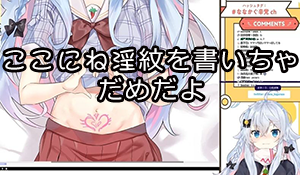
<style>
.page{position:relative;width:300px;height:175px}
.page>*{position:absolute;margin:0}
.t1{font:25px/30px "Meiryo";letter-spacing:0.09em;color:#ffffff}
.t2{font:25px/30px "DFPShaoNvW5";letter-spacing:0.09em;color:#ffffff}
</style>
<div class="page">
<p class="t1" style="left:5px;top:48px;width:291px;height:52px;text-align:center"><span class="t2">ここにね淫</span>紋を書いちゃ<br>だめだよ</p>
</div>
